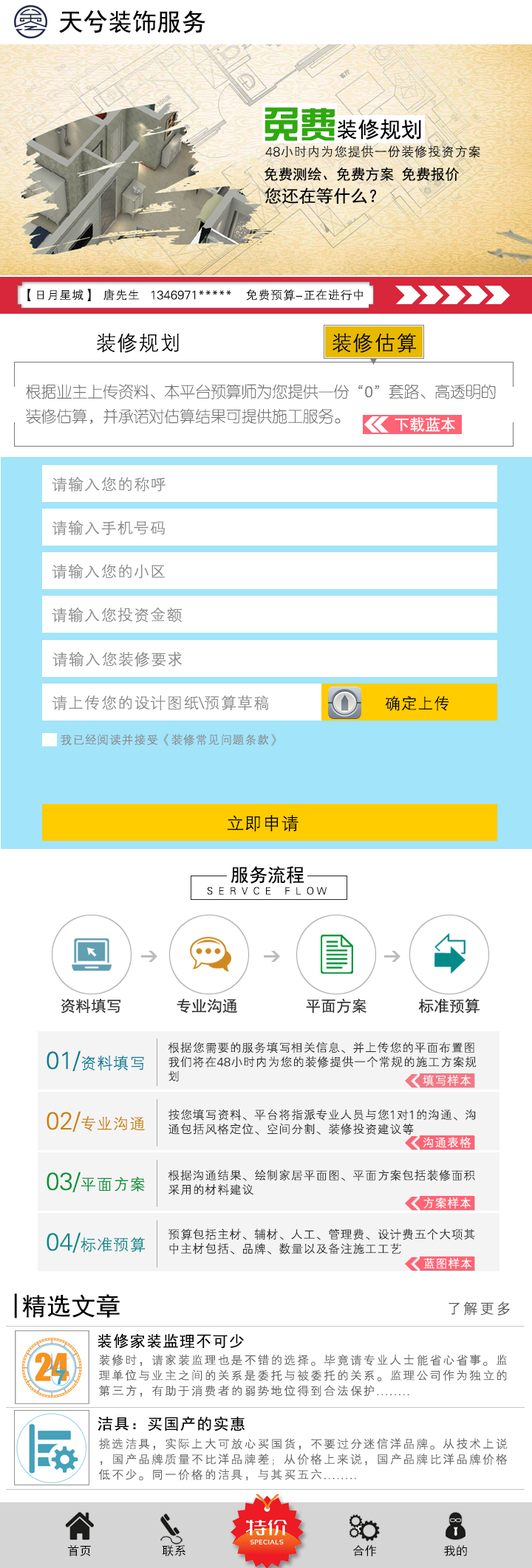
<style>
.page{position:relative;width:532px;height:1568px;background:#ffffff}
.page>*{position:absolute;margin:0}
.t1{font:24.6px "SimHei";color:#000000}
.t2{font:21.7px "SimHei";color:#000000}
.t3{font:36.4px "FZZYJW--GB1-0";color:#2fa90e}
.t4{font:13.3px "FZXH1JW--GB1-0";color:#141414}
.t5{font:14.5px "SimHei";color:#000000}
.t6{font:17.2px "SimHei";color:#000000}
.t7{font:12.3px "FZXH1JW--GB1-0";color:#080808}
.t8{font:21.5px "FZXH1JW--GB1-0";color:#000000}
.t9{font:15.4px/24.6px "FZY1JW--GB1-0";color:#717070}
.t10{font:15.4px "SimHei";color:#ffffff}
.t11{font:16.4px "FZXH1JW--GB1-0";color:#8b8b8b}
.t12{font:16.4px "FZXH1JW--GB1-0";color:#000000}
.t13{font:12.3px "FZXH1JW--GB1-0";color:#8b8b8b}
.t14{font:18.5px "FZXH1JW--GB1-0";color:#000000}
.t15{font:18.5px "SimHei";color:#000000}
.t16{font:10.1px "FZXH1JW--GB1-0";color:#000000}
.t17{font:15.4px "SimHei";color:#353535}
.t18{font:12.3px/14.4px "FZXH1JW--GB1-0";color:#2b2828}
.t19{font:16.4px "FZXH1JW--GB1-0";color:#007d97}
.t20{font:8.9px "FZXH1JW--GB1-0";color:#007d97}
.t21{font:12.3px "FZXH1JW--GB1-0";color:#ffffff}
.t22{font:16.4px "FZXH1JW--GB1-0";color:#cb8100}
.t23{font:8.9px "FZXH1JW--GB1-0";color:#cb8100}
.t24{font:16.4px "FZXH1JW--GB1-0";color:#019234}
.t25{font:8.9px "FZXH1JW--GB1-0";color:#019234}
.t26{font:16.4px "FZXH1JW--GB1-0";color:#028a89}
.t27{font:8.9px "FZXH1JW--GB1-0";color:#028a89}
.t28{font:15.4px "FZXH1JW--GB1-0";letter-spacing:0.075em;color:#5a5a5a}
.t29{font:15.4px "SimHei";letter-spacing:0.075em;color:#000000}
.t30{font:12.3px/15.4px "FZXH1JW--GB1-0";letter-spacing:0.075em;color:#636363}
.t31{font:15.4px/18.5px "SimHei";letter-spacing:0.075em;color:#000000}
.t32{font:12px "SimHei";color:#000000}
</style>
<div class="page">
<p class="t1" style="left:59px;top:10px;width:146px;height:24px">天兮装饰服务</p>
<p class="t2" style="left:264px;top:107px;width:157px;height:34px"><span class="t3">免费</span>装修规划</p>
<p class="t4" style="left:265px;top:145px;width:215px;height:13px">48小时内为您提供一份装修投资方案</p>
<p class="t5" style="left:264px;top:167px;width:195px;height:15px">免费测绘、免费方案 免费报价</p>
<p class="t6" style="left:264px;top:188px;width:112px;height:16px">您还在等什么？</p>
<p class="t7" style="left:27px;top:289px;width:335px;height:12px">【日月星城】  唐先生   1346971*****    免费预算-正在进行中</p>
<p class="t8" style="left:97px;top:333px;width:319px;height:20px">装修规划                         装修估算</p>
<p class="t9" style="left:26px;top:384px;width:469px;height:40px">根据业主上传资料、本平台预算师为您提供一份“0”套路、高透明的<br>装修估算，并承诺对估算结果可提供施工服务。</p>
<p class="t10" style="left:394px;top:417px;width:61px;height:15px">下载蓝本</p>
<p class="t11" style="left:52px;top:477px;width:113px;height:15px">请输入您的称呼</p>
<p class="t11" style="left:52px;top:520px;width:113px;height:15px">请输入手机号码</p>
<p class="t11" style="left:52px;top:564px;width:113px;height:15px">请输入您的小区</p>
<p class="t11" style="left:52px;top:608px;width:130px;height:14px">请输入您投资金额</p>
<p class="t11" style="left:52px;top:652px;width:130px;height:15px">请输入您装修要求</p>
<p class="t11" style="left:52px;top:695px;width:216px;height:15px">请上传您的设计图纸\预算草稿</p>
<p class="t12" style="left:385px;top:696px;width:64px;height:15px">确定上传</p>
<p class="t13" style="left:61px;top:734px;width:215px;height:12px">我已经阅读并接受《装修常见问题条款》</p>
<p class="t14" style="left:227px;top:815px;width:71px;height:16px">立即申请</p>
<p class="t15" style="left:230px;top:866px;width:74px;height:18px">服务流程</p>
<p class="t16" style="left:207px;top:887px;width:119px;height:8px">S  E  R  V  C  E     F  L  O W</p>
<p class="t17" style="left:61px;top:998px;width:59px;height:16px">资料填写</p>
<p class="t17" style="left:176px;top:998px;width:61px;height:16px">专业沟通</p>
<p class="t17" style="left:306px;top:998px;width:60px;height:16px">平面方案</p>
<p class="t17" style="left:418px;top:998px;width:61px;height:16px">标准预算</p>
<p class="t18" style="left:168px;top:1042px;width:308px;height:40px">根据您需要的服务填写相关信息、并上传您的平面布置图<br>我们将在48小时内为您的装修提供一个常规的施工方案规<br>划</p>
<p class="t19" style="left:47px;top:1051px;width:97px;height:20px"><span class="t20">01/</span>资料填写</p>
<p class="t21" style="left:422px;top:1075px;width:49px;height:11px">填写样本</p>
<p class="t18" style="left:168px;top:1109px;width:307px;height:26px">按您填写资料、平台将指派专业人员与您1对1的沟通、沟<br>通包括风格定位、空间分割、装修投资建议等</p>
<p class="t22" style="left:47px;top:1111px;width:98px;height:21px"><span class="t23">02/</span>专业沟通</p>
<p class="t21" style="left:422px;top:1137px;width:49px;height:11px">沟通表格</p>
<p class="t18" style="left:168px;top:1169px;width:307px;height:26px">根据沟通结果、绘制家居平面图、平面方案包括装修面积<br>采用的材料建议</p>
<p class="t24" style="left:47px;top:1172px;width:98px;height:20px"><span class="t25">03/</span>平面方案</p>
<p class="t21" style="left:423px;top:1197px;width:48px;height:11px">方案样本</p>
<p class="t18" style="left:168px;top:1228px;width:307px;height:27px">预算包括主材、辅材、人工、管理费、设计费五个大项其<br>中主材包括、品牌、数量以及备注施工工艺</p>
<p class="t26" style="left:47px;top:1232px;width:98px;height:21px"><span class="t27">04/</span>标准预算</p>
<p class="t21" style="left:423px;top:1258px;width:49px;height:11px">蓝图样本</p>
<p class="t1" style="left:14px;top:1293px;width:106px;height:25px">|精选文章</p>
<p class="t28" style="left:448px;top:1301px;width:61px;height:15px">了解更多</p>
<p class="t29" style="left:97px;top:1333px;width:147px;height:16px">装修家装监理不可少</p>
<p class="t30" style="left:98px;top:1354px;width:408px;height:43px"><span class="t31"><br></span>装修时，请家装监理也是不错的选择。毕竟请专业人士能省心省事。监<br>理单位与业主之间的关系是委托与被委托的关系。监理公司作为独立的<br>第三方，有助于消费者的弱势地位得到合法保护........</p>
<p class="t29" style="left:97px;top:1416px;width:148px;height:15px">洁具：买国产的实惠</p>
<p class="t30" style="left:98px;top:1438px;width:409px;height:43px">挑选洁具，实际上大可放心买国货，不要过分迷信洋品牌。从技术上说<br>，国产品牌质量不比洋品牌差；从价格上来说，国产品牌比洋品牌价格<br>低不少。同一价格的洁具，与其买五六........</p>
<p class="t32" style="left:68px;top:1545px;width:23px;height:11px">首页</p>
<p class="t32" style="left:162px;top:1545px;width:23px;height:11px">联系</p>
<p class="t32" style="left:353px;top:1544px;width:23px;height:12px">合作</p>
<p class="t32" style="left:444px;top:1545px;width:23px;height:11px">我的</p>
</div>
